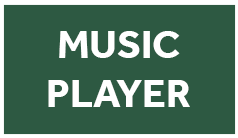
<style>
.page{position:relative;width:238px;height:138px;background:#2d5942}
.page>*{position:absolute;margin:0}
.t1{font:40.6px "Effra-Bold";color:#ffffff}
</style>
<div class="page">
<p class="t1" style="left:48px;top:31px;width:142px;height:76px;text-align:center">MUSIC<br>PLAYER</p>
</div>
